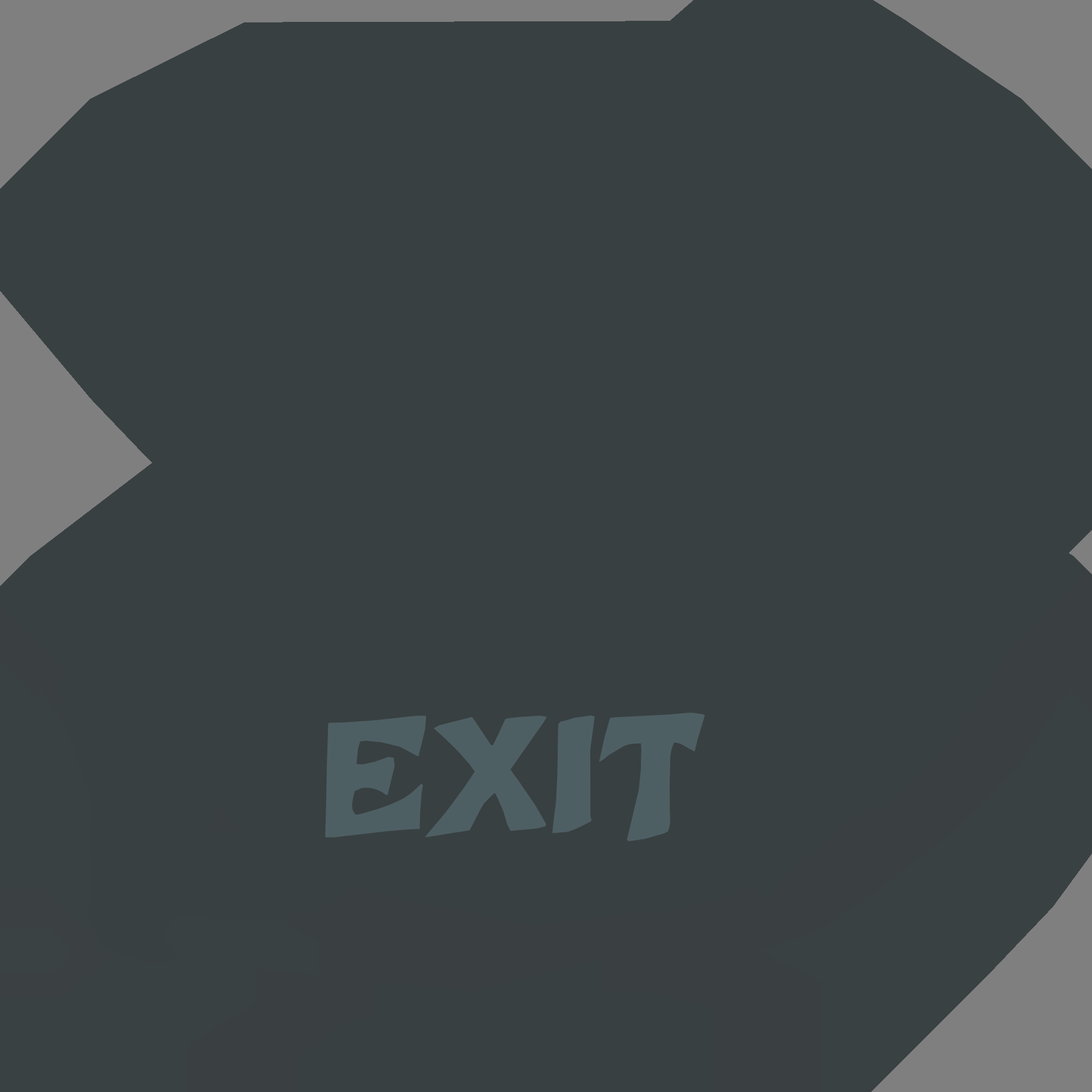
<style>
.page{position:relative;width:1092px;height:1092px;background:#394042}
.page>*{position:absolute;margin:0}
.t1{font:160px "Tarzan";color:#4e5f64}
</style>
<div class="page">
<p class="t1" style="left:325px;top:712px;width:380px;height:129px">EXIT</p>
</div>
